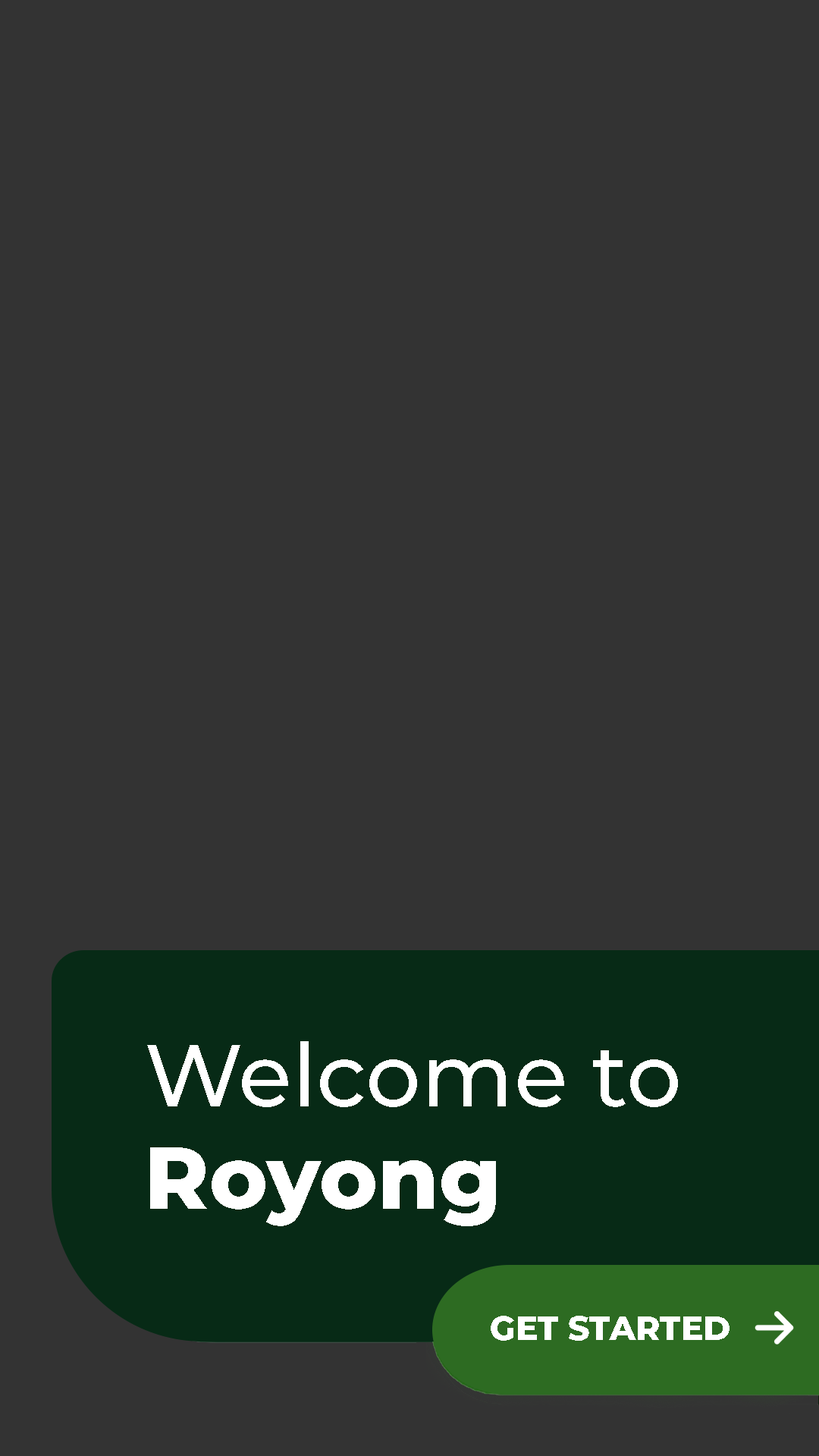
<style>
.page{position:relative;width:819px;height:1456px;background:#333333}
.page>*{position:absolute;margin:0}
.t1{font:87.9px/102.2px "Montserrat-Medium";color:#ffffff}
.t2{font:87.9px/102.2px "Montserrat-ExtraBold";color:#ffffff}
.t3{font:33.2px "Montserrat-ExtraBold";color:#ffffff}
</style>
<div class="page">
<p class="t1" style="left:147px;top:1041px;width:531px;height:185px">Welcome to<br><span class="t2">Royong</span></p>
<p class="t3" style="left:491px;top:1316px;width:239px;height:25px">GET STARTED</p>
</div>
